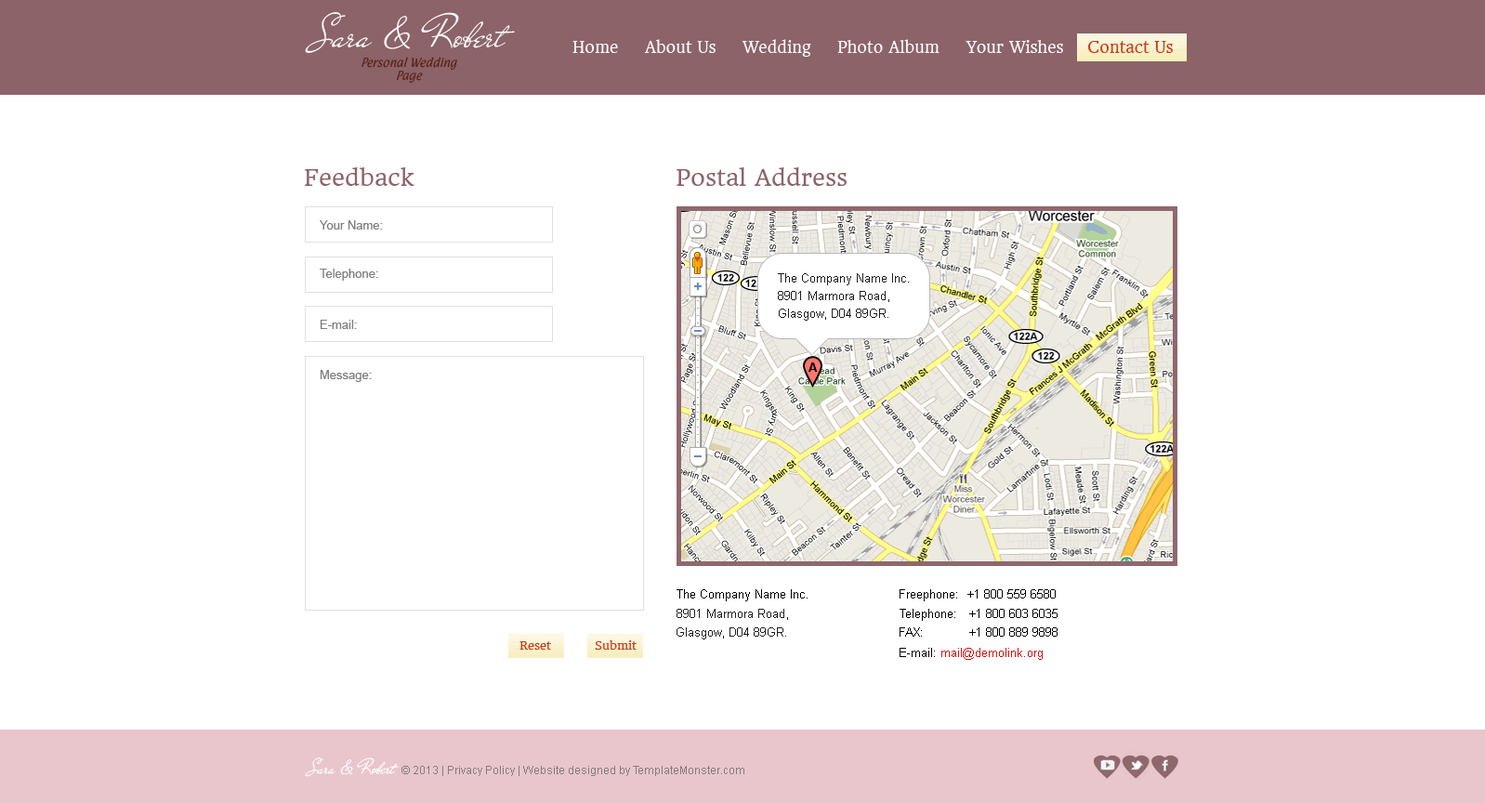
<style>
.page{position:relative;width:1485px;height:803px;background:#ffffff}
.page>*{position:absolute;margin:0}
.t1{font:44.6px "MrDeHaviland-Regular";color:#ffffff}
.t2{font:14.9px "HeadlandOne-Regular";color:#ffffff}
.t3{font:14.9px "HeadlandOne-Regular";color:#c53d1d}
.t4{font:10.2px "Paprika-Regular";color:#5c2113;font-style:italic}
.t5{font:22.3px "HeadlandOne-Regular";color:#8b6369}
.t6{font:12.1px "ArialMT";color:#827e7e}
.t7{font:12.1px/17.7px "ArialMT";color:#1e1e1e}
.t8{font:12.1px "Arial-BoldMT";color:#000000}
.t9{font:12.1px "ArialMT";color:#000000}
.t10{font:12.1px "ArialMT";color:#1e1e1e}
.t11{font:11.2px "HeadlandOne-Regular";color:#c53d1d}
.t12{font:12.1px "ArialMT";color:#d01414}
.t13{font:19.9px "MrDeHaviland-Regular";color:#ffffff}
.t14{font:11.2px "ArialMT";color:#827e7e}
</style>
<div class="page">
<p class="t1" style="left:305px;top:12px;width:210px;height:41px">Sara  &amp;  Robert</p>
<p class="t2" style="left:572px;top:41px;width:46px;height:12px">Home</p>
<p class="t2" style="left:644px;top:39px;width:72px;height:14px">About Us</p>
<p class="t2" style="left:742px;top:39px;width:69px;height:18px">Wedding</p>
<p class="t2" style="left:837px;top:39px;width:103px;height:14px">Photo Album</p>
<p class="t2" style="left:966px;top:40px;width:97px;height:13px">Your Wishes</p>
<p class="t3" style="left:1088px;top:41px;width:85px;height:12px">Contact Us</p>
<p class="t4" style="left:362px;top:57px;width:96px;height:26px;text-align:center">Personal Wedding Page</p>
<p class="t5" style="left:305px;top:167px;width:109px;height:19px">Feedback</p>
<p class="t5" style="left:677px;top:167px;width:170px;height:19px">Postal Address</p>
<p class="t6" style="left:320px;top:220px;width:63px;height:10px">Your Name:</p>
<p class="t6" style="left:320px;top:269px;width:58px;height:12px">Telephone:</p>
<p class="t7" style="left:778px;top:273px;width:131px;height:48px">The Company Name Inc.<br>8901 Marmora Road,<br>Glasgow, D04 89GR.</p>
<p class="t6" style="left:320px;top:320px;width:37px;height:9px">E-mail:</p>
<p class="t8" style="left:809px;top:362px;width:9px;height:10px">A</p>
<p class="t6" style="left:320px;top:370px;width:52px;height:12px">Message:</p>
<p class="t9" style="left:677px;top:589px;width:131px;height:12px">The Company Name Inc.</p>
<p class="t9" style="left:900px;top:589px;width:156px;height:12px">Freephone:  +1 800 559 6580</p>
<p class="t10" style="left:677px;top:609px;width:111px;height:11px">8901 Marmora Road,</p>
<p class="t9" style="left:900px;top:609px;width:158px;height:12px">Telephone:   +1 800 603 6035</p>
<p class="t10" style="left:677px;top:627px;width:109px;height:12px">Glasgow, D04 89GR.</p>
<p class="t9" style="left:900px;top:627px;width:158px;height:10px">FAX:            +1 800 889 9898</p>
<p class="t11" style="left:519px;top:641px;width:32px;height:9px">Reset</p>
<p class="t11" style="left:595px;top:640px;width:42px;height:10px">Submit</p>
<p class="t12" style="left:900px;top:648px;width:143px;height:12px"><span class="t9">E-mail: </span>mail@demolink.org</p>
<p class="t13" style="left:305px;top:757px;width:95px;height:20px">Sara  &amp;  Robert</p>
<p class="t14" style="left:401px;top:766px;width:343px;height:10px">© 2013 | Privacy Policy | Website designed by TemplateMonster.com</p>
</div>
